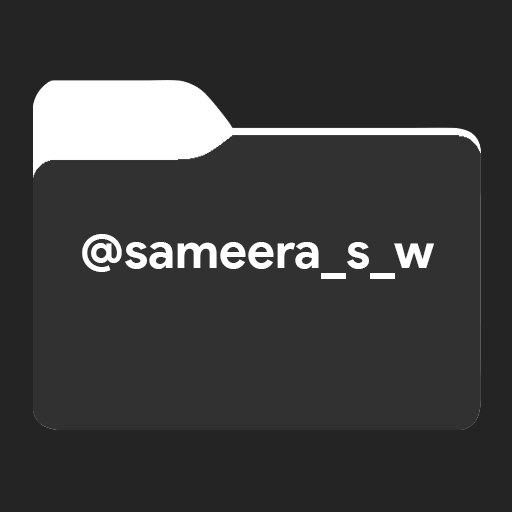
<style>
.page{position:relative;width:512px;height:512px;background:#313131}
.page>*{position:absolute;margin:0}
.t1{font:50px "ProductSans-Bold";color:#ffffff}
</style>
<div class="page">
<p class="t1" style="left:82px;top:234px;width:352px;height:45px">@sameera_s_w</p>
</div>
